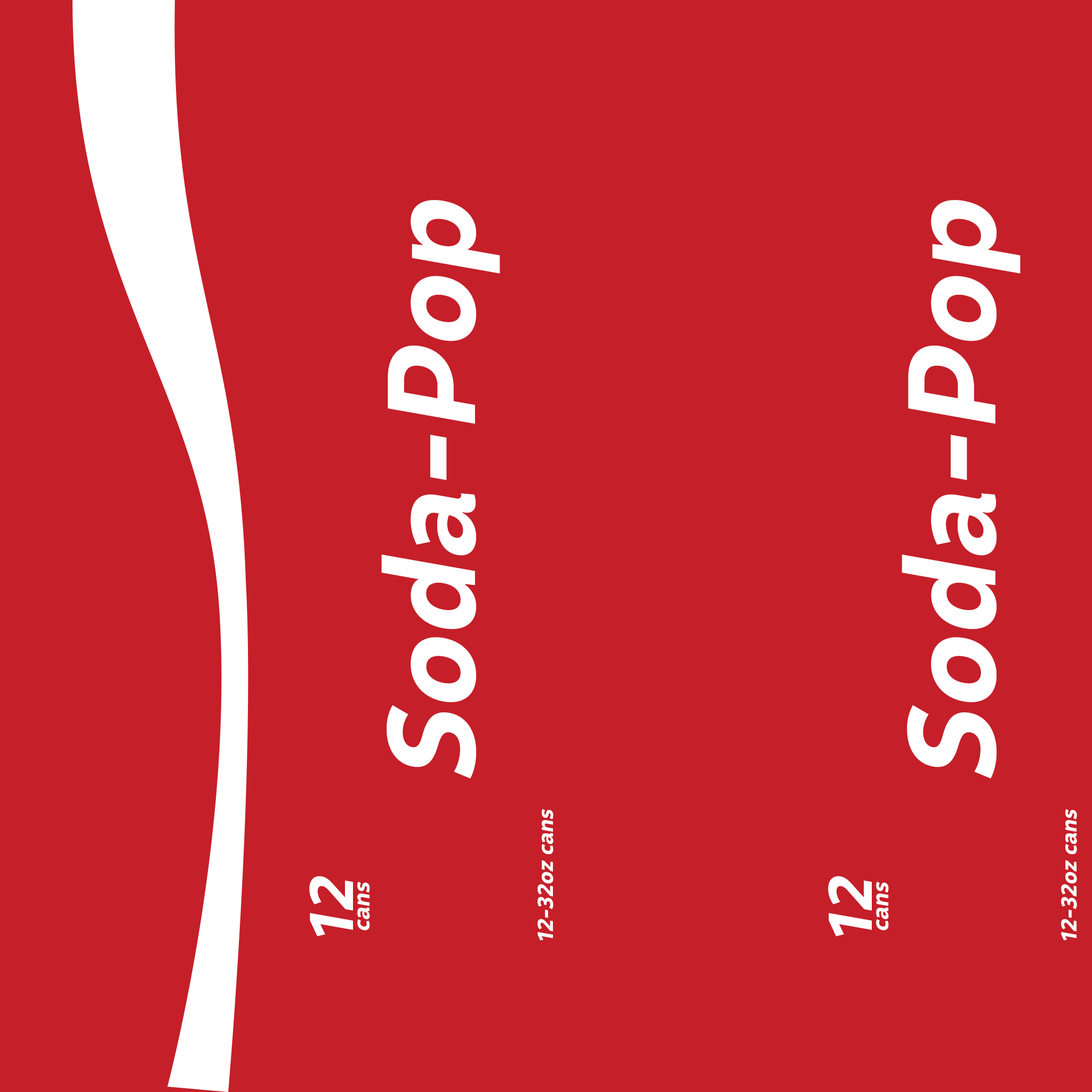
<style>
.page{position:relative;width:1092px;height:1092px;background:#c51f29}
.page>*{position:absolute;margin:0}
.t1{font:124.1px "Malva-Bold";letter-spacing:0.01em;color:#ffffff;font-style:italic}
.t2{font:21.5px "Malva-Bold";letter-spacing:0.01em;color:#ffffff;font-style:italic}
</style>
<div class="page">
<p class="t1" style="left:381px;top:200px;width:119px;height:578px;rotate:-90deg">Soda-Pop</p>
<p class="t1" style="left:902px;top:200px;width:119px;height:578px;rotate:-90deg">Soda-Pop</p>
<p class="t2" style="left:537px;top:809px;width:16px;height:132px;rotate:-90deg">12-32oz cans</p>
<p class="t2" style="left:1061px;top:809px;width:16px;height:132px;rotate:-90deg">12-32oz cans</p>
</div>
